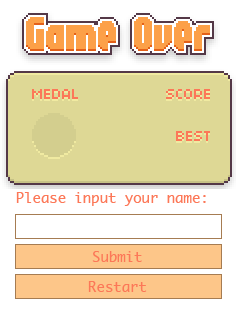
<style>
.page{position:relative;width:236px;height:310px;background:#ffffff}
.page>*{position:absolute;margin:0}
.t1{font:14px "Ayuthaya";color:#fc7858}
</style>
<div class="page">
<p class="t1" style="left:16px;top:192px;width:190px;height:14px">Please input your name:</p>
<p class="t1" style="left:92px;top:251px;width:50px;height:11px">Submit</p>
<p class="t1" style="left:88px;top:281px;width:59px;height:11px">Restart</p>
</div>
